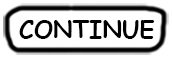
<style>
.page{position:relative;width:172px;height:58px;background:#ffffff}
.page>*{position:absolute;margin:0}
.t1{font:24px "ComicSansMS-Bold";color:#000000;text-transform:uppercase}
</style>
<div class="page">
<p class="t1" style="left:19px;top:20px;width:136px;height:19px">continue</p>
</div>
